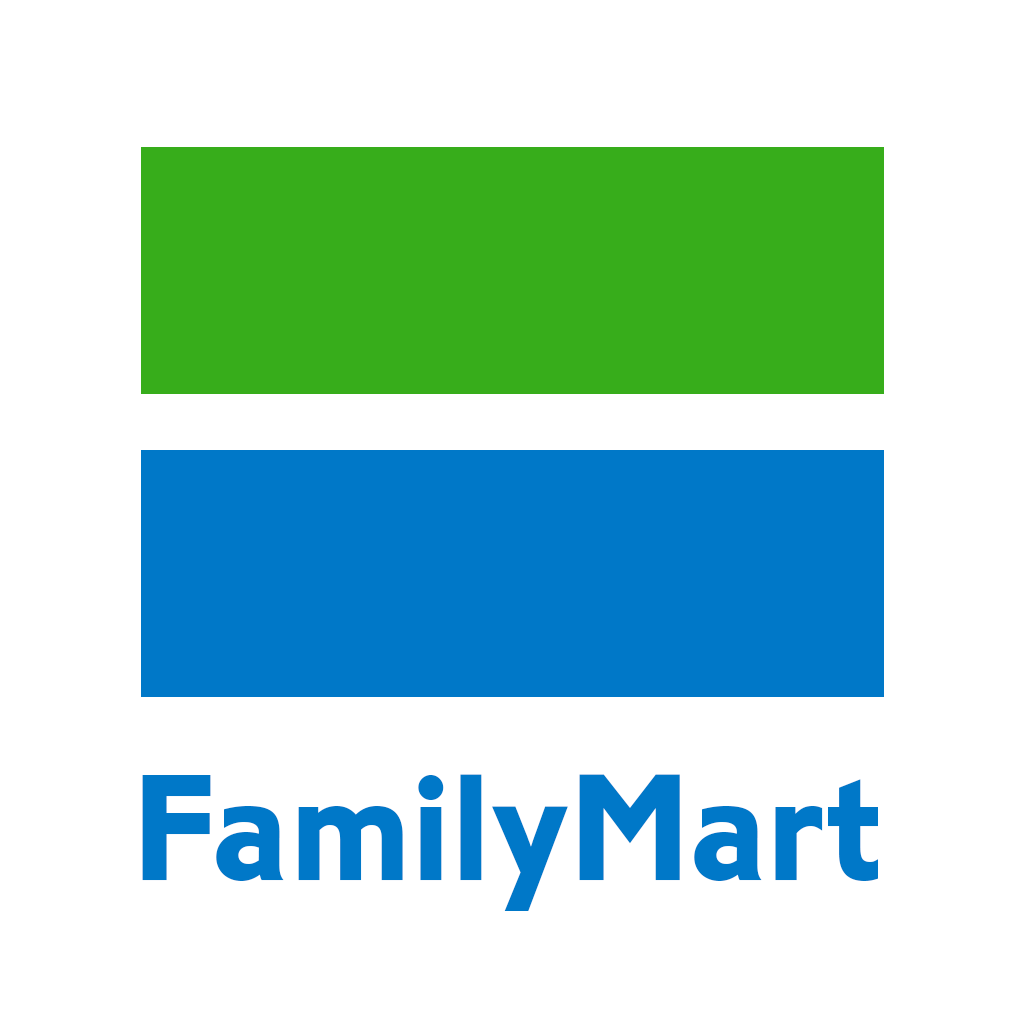
<style>
.page{position:relative;width:1024px;height:1024px;background:#ffffff}
.page>*{position:absolute;margin:0}
.t1{font:158.3px "CorinthianBoldPlain";color:#0078c8}
</style>
<div class="page">
<p class="t1" style="left:142px;top:774px;width:736px;height:137px">FamilyMart</p>
</div>
